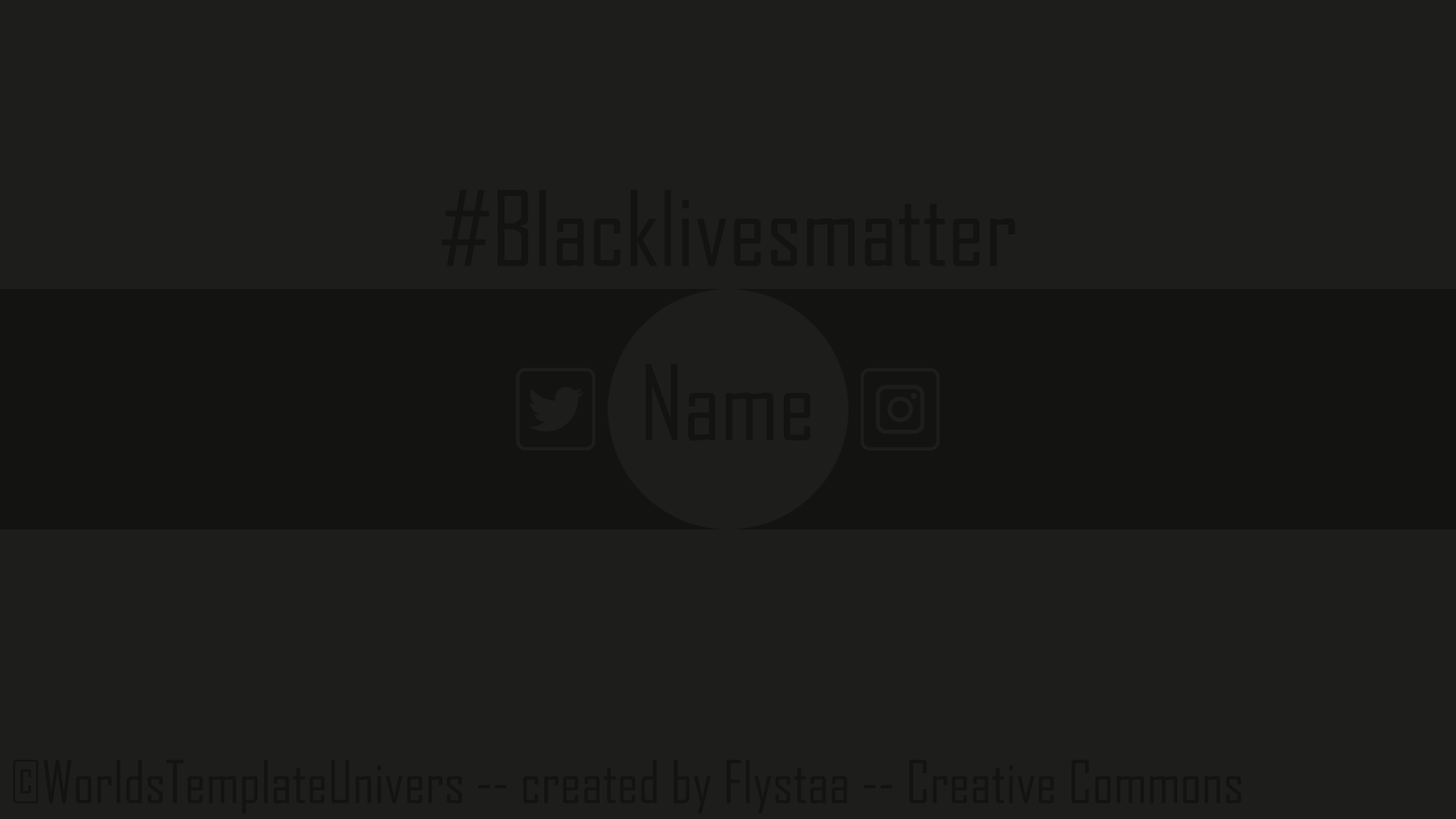
<style>
.page{position:relative;width:1456px;height:819px;background:#1d1d1b}
.page>*{position:absolute;margin:0}
.t1{font:99.5px "AgencyFB-Reg";color:#131312}
.t2{font:56.9px "AgencyFB-Reg";color:#131312}
</style>
<div class="page">
<p class="t1" style="left:442px;top:189px;width:573px;height:78px">#Blacklivesmatter</p>
<p class="t1" style="left:646px;top:364px;width:164px;height:77px">Name</p>
<p class="t2" style="left:13px;top:759px;width:1228px;height:55px">©WorldsTemplateUnivers -- created by Flystaa -- Creative Commons</p>
</div>
